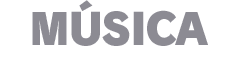
<style>
.page{position:relative;width:240px;height:60px;background:#ffffff}
.page>*{position:absolute;margin:0}
.t1{font:42.7px "RodinPro-UB";letter-spacing:-0.053em;color:#8c8b93}
</style>
<div class="page">
<p class="t1" style="left:32px;top:0px;width:176px;height:46px">MÚSICA</p>
</div>
